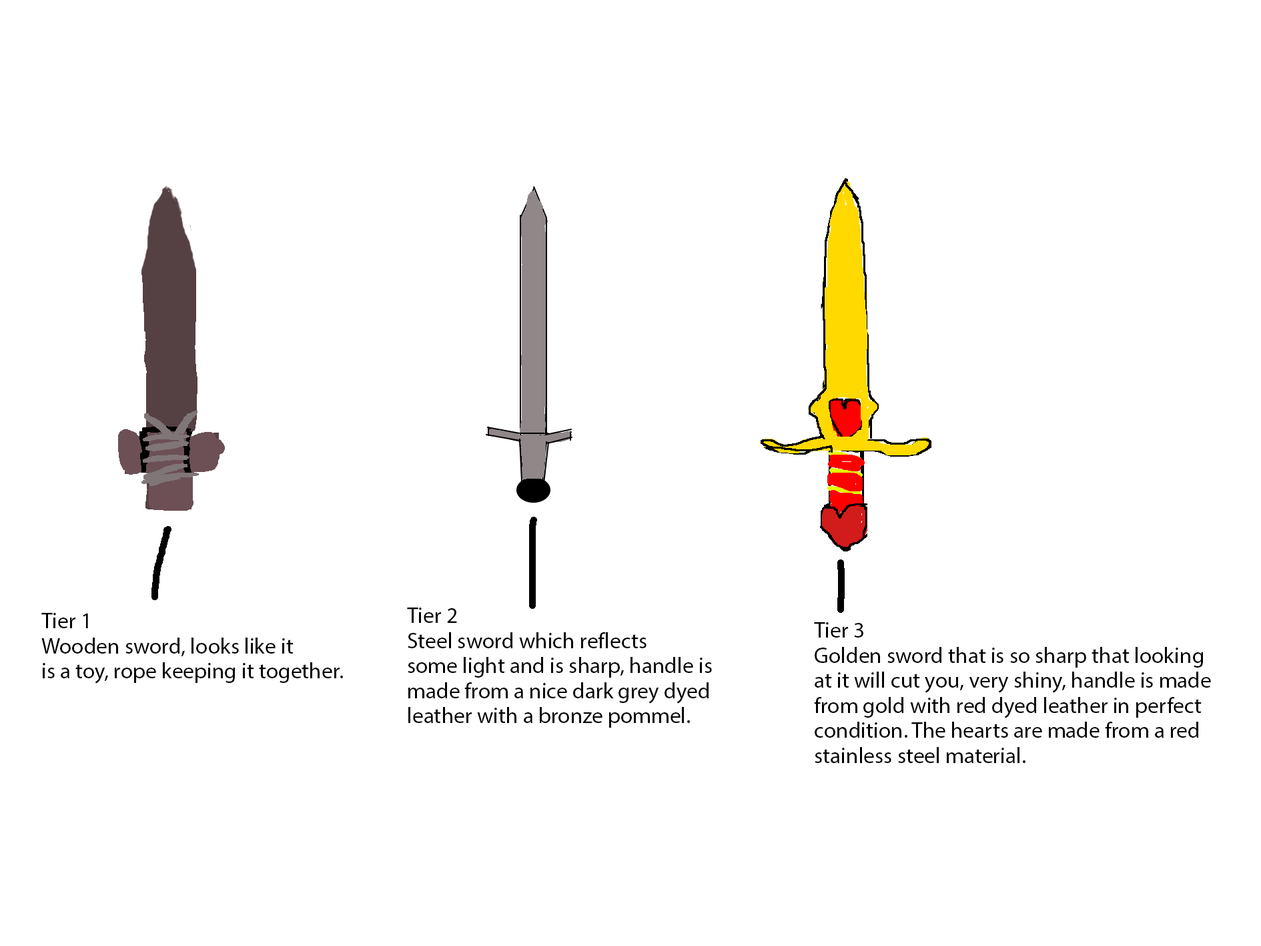
<style>
.page{position:relative;width:1261px;height:946px;background:#ffffff}
.page>*{position:absolute;margin:0}
.t1{font:22.2px/25px "MyriadPro-Regular";color:#000000}
</style>
<div class="page">
<p class="t1" style="left:41px;top:613px;width:302px;height:70px">Tier 1<br>Wooden sword, looks like it <br>is a toy, rope keeping it together.</p>
<p class="t1" style="left:407px;top:607px;width:305px;height:120px">Tier 2<br>Steel sword which reflects <br>some light and is sharp, handle is <br>made from a nice dark grey dyed <br>leather with a bronze pommel.</p>
<p class="t1" style="left:814px;top:622px;width:397px;height:141px">Tier 3<br>Golden sword that is so sharp that looking <br>at it will cut you, very shiny, handle is made <br>from gold with red dyed leather in perfect <br>condition. The hearts are made from a red<br>stainless steel material.</p>
</div>
